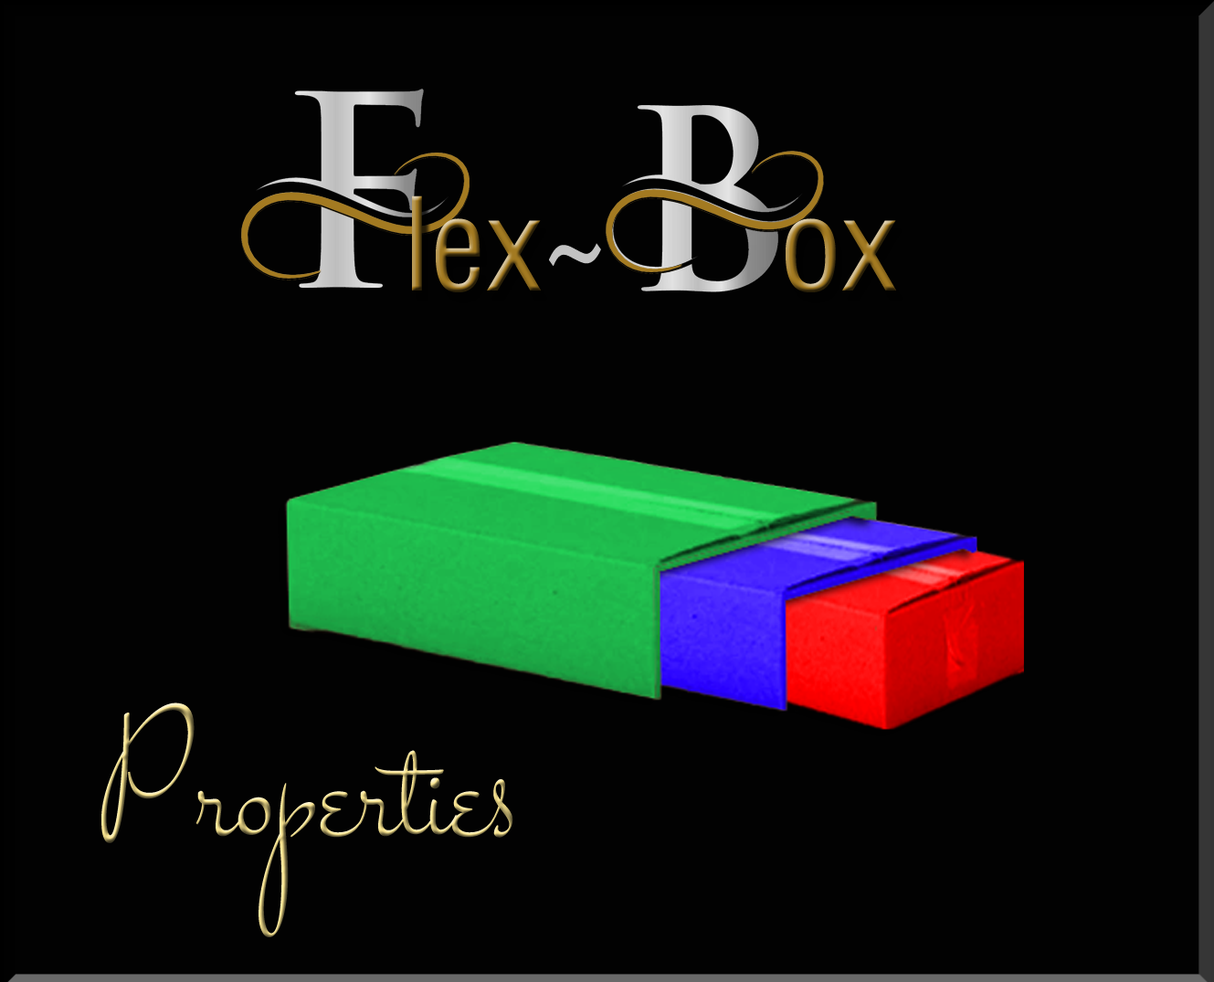
<style>
.page{position:relative;width:1214px;height:982px;background:#020202}
.page>*{position:absolute;margin:0}
.t1{font:125.6px "HelveticaLTStd-Cond"}
.t2{font:125.6px "HelveticaLTStd-Cond";color:#c2c2c2}
.t3{font:178.9px "Stalemate-Regular"}
</style>
<div class="page">
<p class="t1" style="left:412px;top:196px;width:129px;height:96px">lex</p>
<p class="t1" style="left:786px;top:218px;width:110px;height:74px">ox</p>
<p class="t2" style="left:549px;top:243px;width:52px;height:24px">~</p>
<p class="t3" style="left:101px;top:703px;width:412px;height:234px">Properties</p>
</div>
